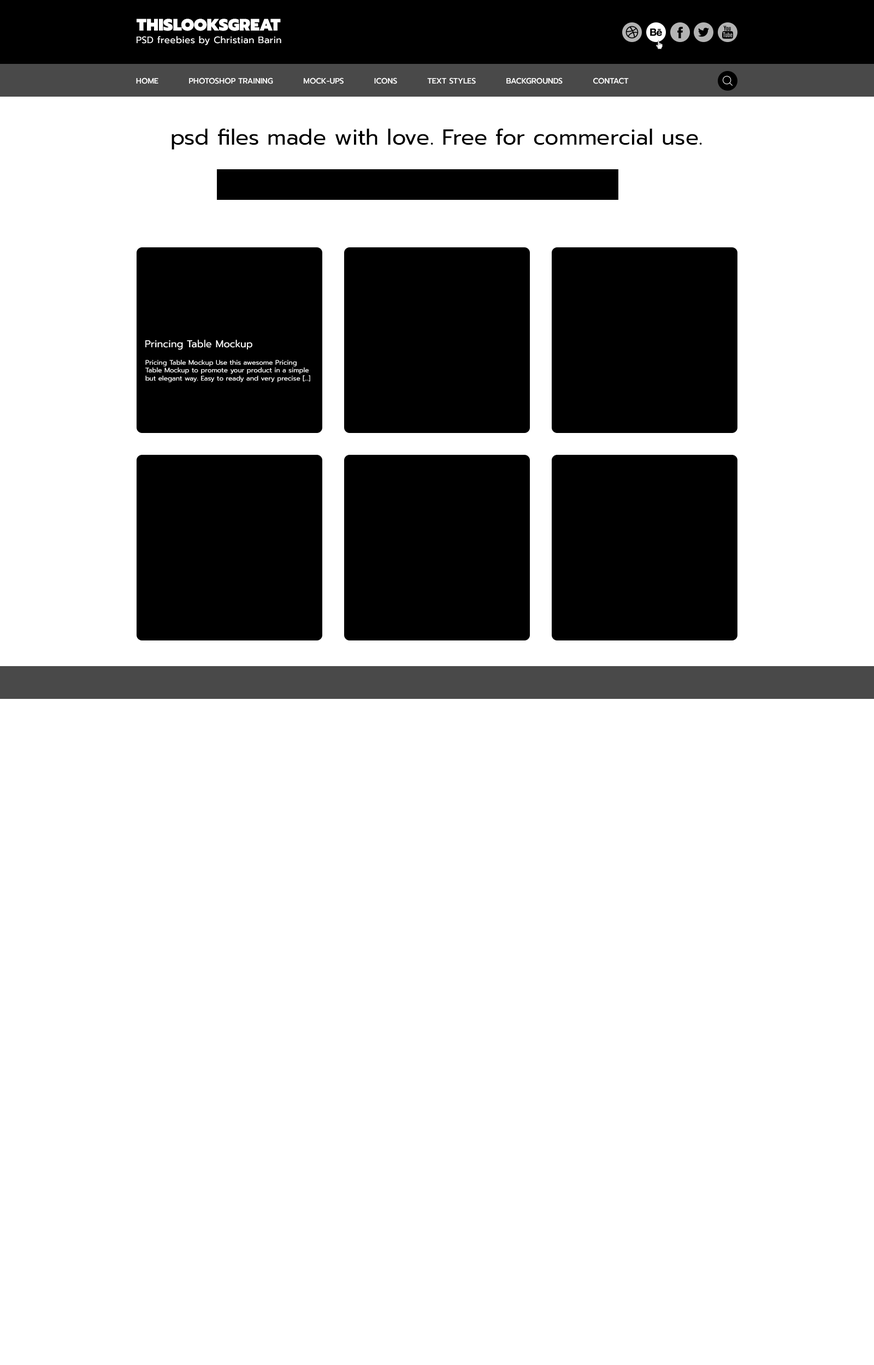
<style>
.page{position:relative;width:874px;height:1365px;background:#ffffff}
.page>*{position:absolute;margin:0}
.t1{font:16.4px "Prompt-Black";color:#ffffff;text-transform:uppercase}
.t2{font:9.3px "Prompt-Regular";letter-spacing:0.018em;color:#ffffff}
.t3{font:7.6px "Prompt-Medium";color:#ffffff;text-transform:uppercase}
.t4{font:21.8px "Prompt-Regular";color:#000000}
.t5{font:9.8px "Prompt-Regular";color:#ffffff}
.t6{font:6.6px "Prompt-Regular";color:#ffffff}
</style>
<div class="page">
<p class="t1" style="left:136px;top:19px;width:145px;height:12px">thislooksgreat</p>
<p class="t2" style="left:136px;top:36px;width:145px;height:9px">PSD freebies by Christian Barin</p>
<p class="t3" style="left:136px;top:78px;width:492px;height:6px">Home           Photoshop Training           Mock-ups           Icons           Text Styles           Backgrounds           Contact</p>
<p class="t4" style="left:171px;top:128px;width:531px;height:22px">psd files made with love. Free for commercial use.</p>
<p class="t5" style="left:145px;top:340px;width:107px;height:10px">Princing Table Mockup</p>
<p class="t6" style="left:145px;top:360px;width:165px;height:22px">Pricing Table Mockup Use this awesome Pricing Table Mockup to promote your product in a simple but elegant way. Easy to ready and very precise […]</p>
</div>
